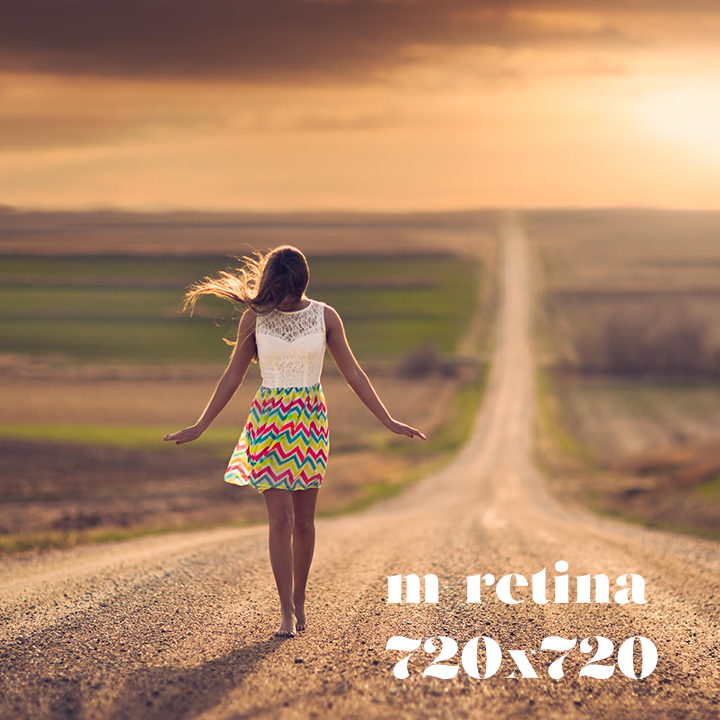
<style>
.page{position:relative;width:720px;height:720px}
.page>*{position:absolute;margin:0}
.t1{font:58.3px "Salome-Fine";color:#ffffff}
</style>
<div class="page">
<p class="t1" style="left:385px;top:560px;width:264px;height:44px">m-retina</p>
<p class="t1" style="left:385px;top:636px;width:273px;height:43px">720x720</p>
</div>
